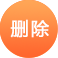
<style>
.page{position:relative;width:58px;height:58px;background:#ffffff}
.page>*{position:absolute;margin:0}
.t1{font:18px "MicrosoftYaHei";letter-spacing:0.075em;color:#ffffff;font-weight:bold}
</style>
<div class="page">
<p class="t1" style="left:10px;top:19px;width:39px;height:19px">删除</p>
</div>
